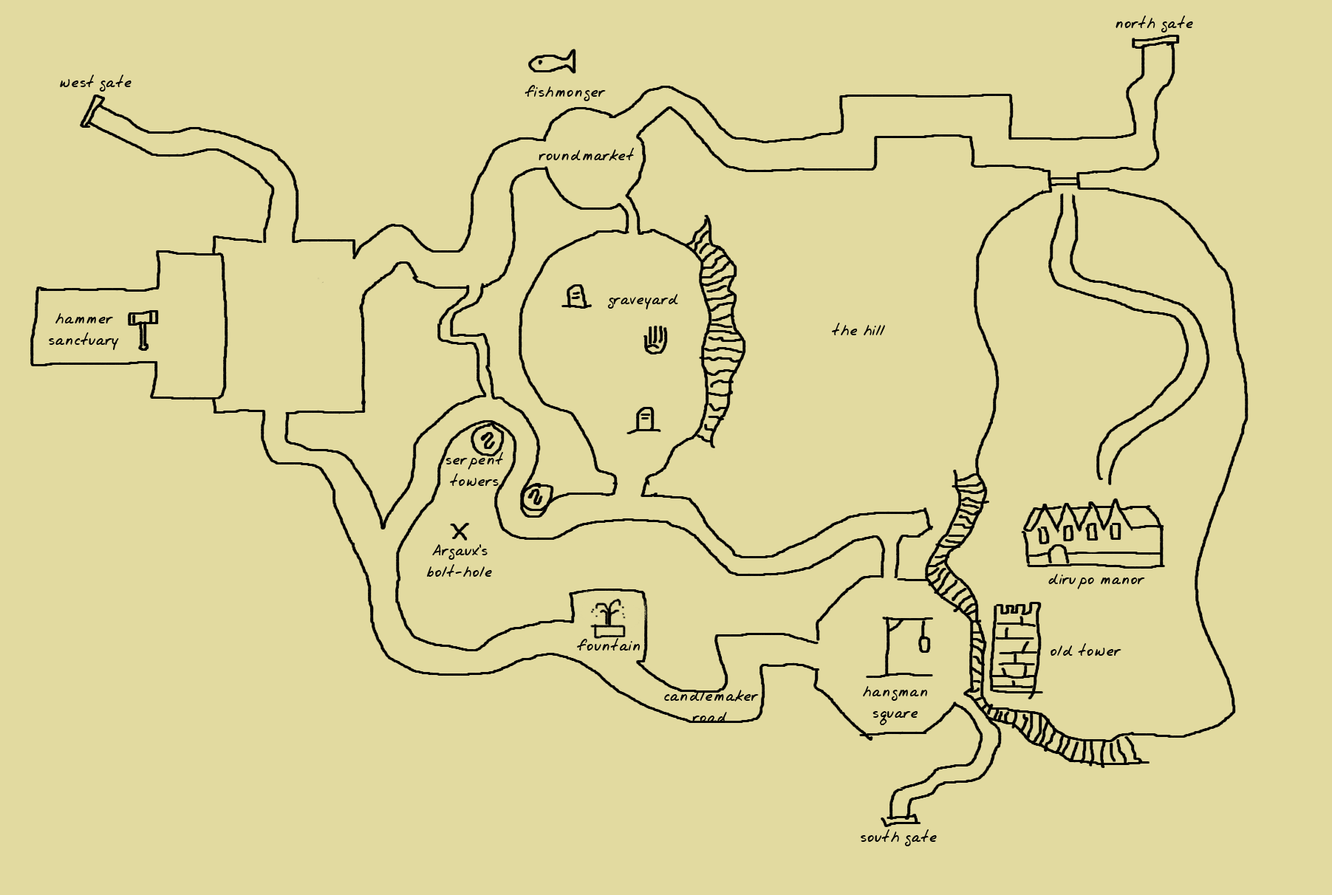
<style>
.page{position:relative;width:1332px;height:895px;background:#e2daa0}
.page>*{position:absolute;margin:0}
.t1{font:17.7px "Jrhand";color:#000000}
</style>
<div class="page">
<p class="t1" style="left:1115px;top:16px;width:78px;height:17px">north gate</p>
<p class="t1" style="left:60px;top:75px;width:71px;height:17px">west gate</p>
<p class="t1" style="left:524px;top:85px;width:82px;height:16px">fishmonger</p>
<p class="t1" style="left:539px;top:148px;width:95px;height:13px">roundmarket</p>
<p class="t1" style="left:607px;top:294px;width:71px;height:16px">graveyard</p>
<p class="t1" style="left:49px;top:313px;width:70px;height:37px;text-align:center">hammer<br>sanctuary</p>
<p class="t1" style="left:832px;top:323px;width:53px;height:12px">the hill</p>
<p class="t1" style="left:445px;top:452px;width:58px;height:34px;text-align:center">serpent<br>towers</p>
<p class="t1" style="left:427px;top:544px;width:65px;height:33px;text-align:center">Argaux’s<br>bolt-hole</p>
<p class="t1" style="left:1048px;top:574px;width:97px;height:15px">dirupo manor</p>
<p class="t1" style="left:577px;top:638px;width:63px;height:13px">fountain</p>
<p class="t1" style="left:1050px;top:643px;width:71px;height:13px">old tower</p>
<p class="t1" style="left:664px;top:690px;width:95px;height:32px;text-align:center">candlemaker<br>road</p>
<p class="t1" style="left:863px;top:686px;width:65px;height:39px;text-align:center">hangman<br>square</p>
<p class="t1" style="left:861px;top:830px;width:76px;height:17px">south gate</p>
</div>
